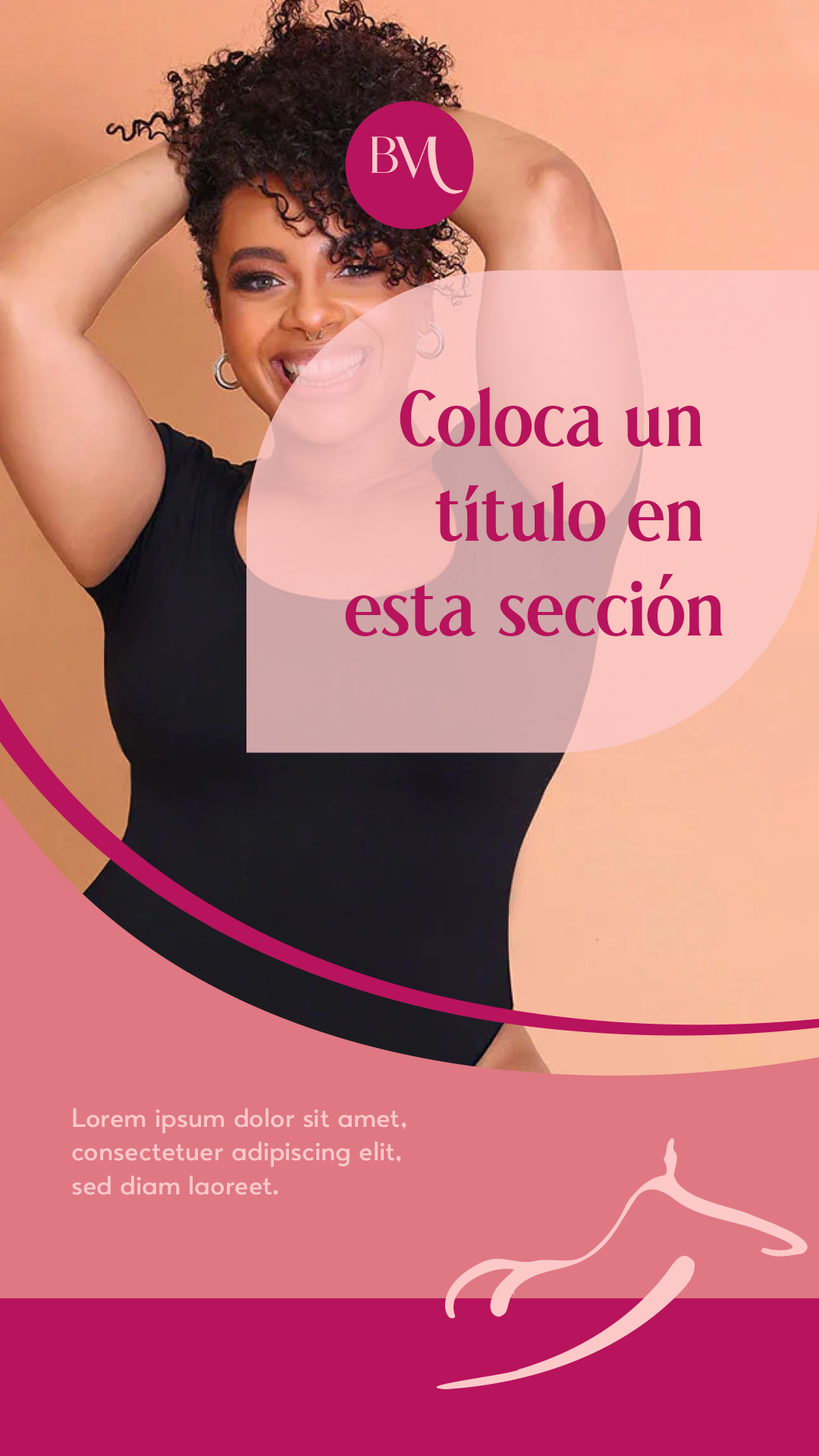
<style>
.page{position:relative;width:819px;height:1456px}
.page>*{position:absolute;margin:0}
.t1{font:78.9px "alinia-Regular";color:#b8135d}
.t2{font:28.1px "QloudyRegular";color:#fdc9c9}
</style>
<div class="page">
<p class="t1" style="left:345px;top:387px;width:378px;height:249px;text-align:right">Coloca un <br>título en <br>esta sección</p>
<p class="t2" style="left:72px;top:1108px;width:334px;height:87px">Lorem ipsum dolor sit amet, consectetuer adipiscing elit, sed diam laoreet.</p>
</div>
